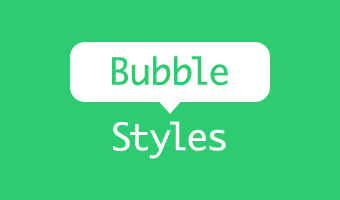
<style>
.page{position:relative;width:340px;height:200px;background:#2ecc71}
.page>*{position:absolute;margin:0}
.t1{font:36px "Monaco";color:#2ecc71}
.t2{font:36px "Monaco";color:#ffffff}
</style>
<div class="page">
<p class="t1" style="left:112px;top:56px;width:116px;height:30px">Bubble</p>
<p class="t2" style="left:113px;top:121px;width:113px;height:38px">Styles</p>
</div>
